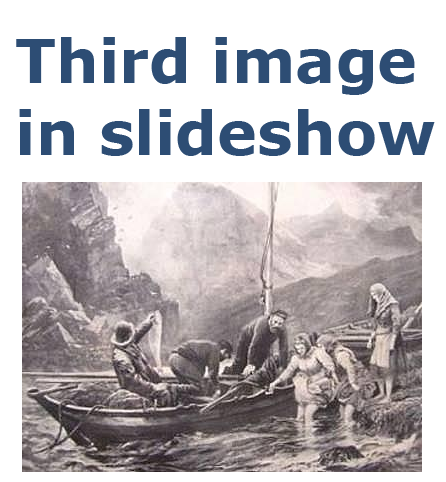
<style>
.page{position:relative;width:446px;height:482px;background:#ffffff}
.page>*{position:absolute;margin:0}
.t1{font:60px "Verdana-Bold";color:#2d4d74}
</style>
<div class="page">
<p class="t1" style="left:16px;top:37px;width:419px;height:119px">Third image <br>in slideshow</p>
</div>
